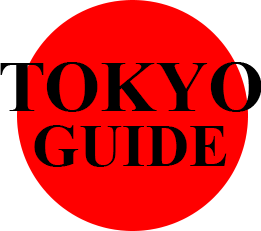
<style>
.page{position:relative;width:261px;height:231px;background:#ff0000}
.page>*{position:absolute;margin:0}
.t1{font:72px "TimesNewRomanPS-BoldMT";color:#000000}
.t2{font:60px "TimesNewRomanPS-BoldMT";color:#000000}
</style>
<div class="page">
<p class="t1" style="left:0px;top:62px;width:262px;height:50px">TOKYO</p>
<p class="t2" style="left:34px;top:125px;width:193px;height:42px">GUIDE</p>
</div>
